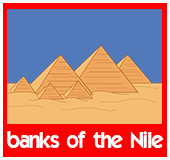
<style>
.page{position:relative;width:170px;height:160px;background:#527aba}
.page>*{position:absolute;margin:0}
.t1{font:22px "ELEGANCE";color:#ffffff}
</style>
<div class="page">
<p class="t1" style="left:7px;top:131px;width:157px;height:17px">banks of the Nile</p>
</div>
